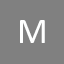
<style>
.page{position:relative;width:64px;height:64px;background:#808080}
.page>*{position:absolute;margin:0}
.t1{font:36px "Calibri";color:#feffff}
</style>
<div class="page">
<p class="t1" style="left:20px;top:20px;width:25px;height:23px">M</p>
</div>
